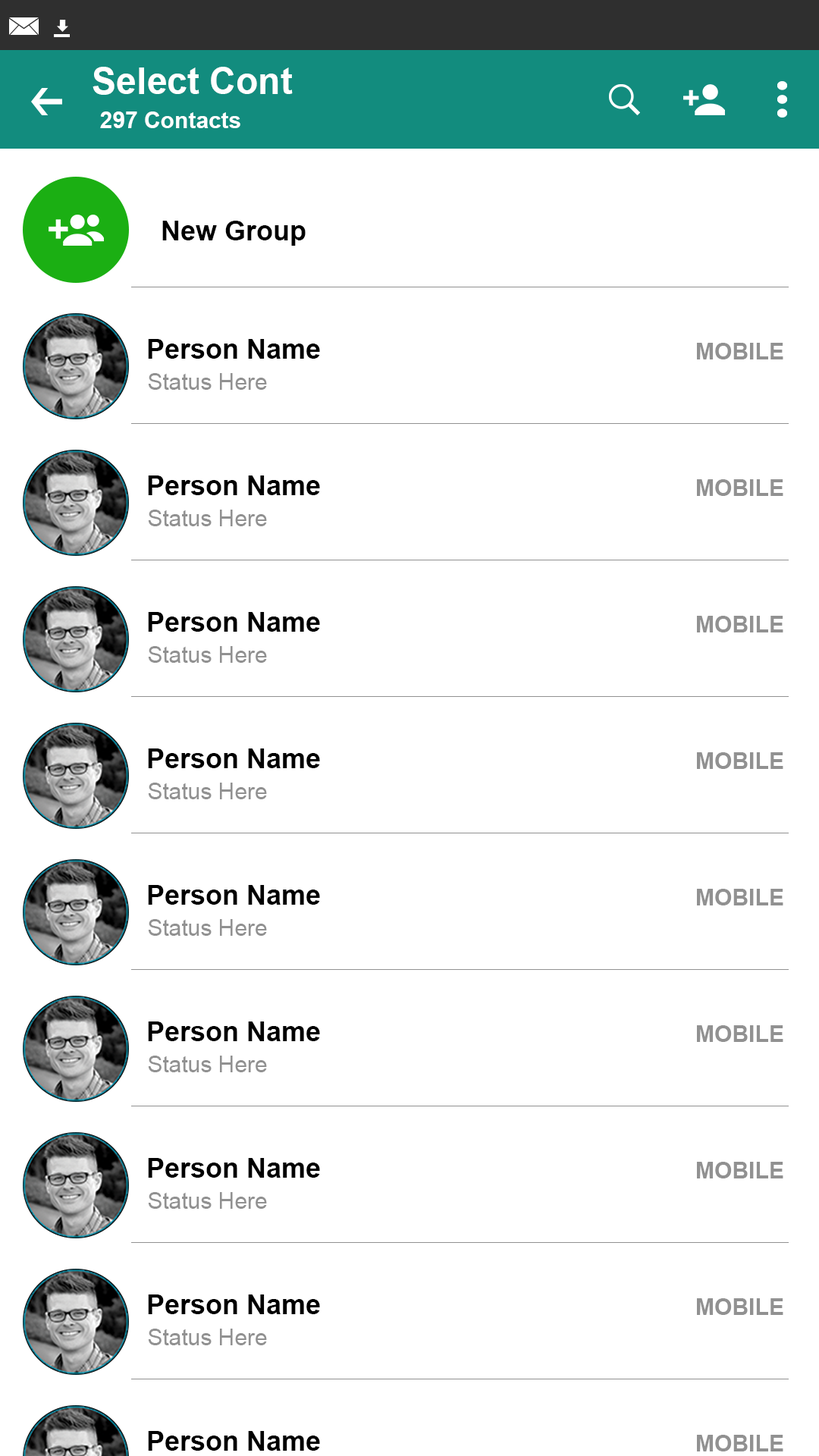
<style>
.page{position:relative;width:819px;height:1456px;background:#ffffff}
.page>*{position:absolute;margin:0}
.t1{font:36.4px "Arial-BoldMT";color:#ffffff}
.t2{font:22.7px "Arial-BoldMT";color:#ffffff}
.t3{font:27.3px "Arial-BoldMT";color:#000000}
.t4{font:22.7px "Arial-BoldMT";color:#919191}
.t5{font:22.7px "ArialMT";color:#919191}
</style>
<div class="page">
<p class="t1" style="left:93px;top:67px;width:200px;height:28px">Select Cont</p>
<p class="t2" style="left:100px;top:111px;width:140px;height:17px">297 Contacts</p>
<p class="t3" style="left:162px;top:221px;width:144px;height:25px">New Group</p>
<p class="t3" style="left:148px;top:339px;width:172px;height:20px">Person Name</p>
<p class="t4" style="left:697px;top:343px;width:86px;height:16px">MOBILE</p>
<p class="t5" style="left:148px;top:373px;width:119px;height:17px">Status Here</p>
<p class="t3" style="left:148px;top:475px;width:172px;height:20px">Person Name</p>
<p class="t4" style="left:697px;top:479px;width:86px;height:17px">MOBILE</p>
<p class="t5" style="left:148px;top:510px;width:119px;height:16px">Status Here</p>
<p class="t3" style="left:148px;top:612px;width:172px;height:20px">Person Name</p>
<p class="t4" style="left:697px;top:616px;width:86px;height:16px">MOBILE</p>
<p class="t5" style="left:148px;top:646px;width:119px;height:17px">Status Here</p>
<p class="t3" style="left:148px;top:748px;width:172px;height:20px">Person Name</p>
<p class="t4" style="left:697px;top:752px;width:86px;height:17px">MOBILE</p>
<p class="t5" style="left:148px;top:783px;width:119px;height:16px">Status Here</p>
<p class="t3" style="left:148px;top:885px;width:172px;height:20px">Person Name</p>
<p class="t4" style="left:697px;top:889px;width:86px;height:16px">MOBILE</p>
<p class="t5" style="left:148px;top:919px;width:119px;height:17px">Status Here</p>
<p class="t3" style="left:148px;top:1021px;width:172px;height:20px">Person Name</p>
<p class="t4" style="left:697px;top:1025px;width:86px;height:17px">MOBILE</p>
<p class="t5" style="left:148px;top:1056px;width:119px;height:16px">Status Here</p>
<p class="t3" style="left:148px;top:1158px;width:172px;height:20px">Person Name</p>
<p class="t4" style="left:697px;top:1162px;width:86px;height:16px">MOBILE</p>
<p class="t5" style="left:148px;top:1192px;width:119px;height:17px">Status Here</p>
<p class="t3" style="left:148px;top:1294px;width:172px;height:20px">Person Name</p>
<p class="t4" style="left:697px;top:1298px;width:86px;height:17px">MOBILE</p>
<p class="t5" style="left:148px;top:1329px;width:119px;height:16px">Status Here</p>
<p class="t3" style="left:148px;top:1431px;width:172px;height:20px">Person Name</p>
<p class="t4" style="left:697px;top:1435px;width:86px;height:16px">MOBILE</p>
</div>
